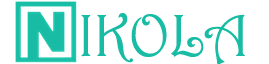
<style>
.page{position:relative;width:269px;height:64px;background:#ffffff}
.page>*{position:absolute;margin:0}
.t1{font:60px "Harrington";color:#18bca4}
</style>
<div class="page">
<p class="t1" style="left:81px;top:13px;width:164px;height:53px">IKOLA</p>
</div>
